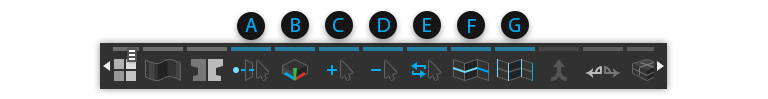
<style>
.page{position:relative;width:768px;height:99px;background:#ffffff}
.page>*{position:absolute;margin:0}
.t1{font:15.4px "MyriadPro-Regular";color:#00aaef;text-transform:uppercase}
</style>
<div class="page">
<p class="t1" style="left:245px;top:18px;width:12px;height:14px">a</p>
<p class="t1" style="left:291px;top:18px;width:9px;height:14px">b</p>
<p class="t1" style="left:333px;top:18px;width:11px;height:14px">c</p>
<p class="t1" style="left:378px;top:18px;width:12px;height:14px">d</p>
<p class="t1" style="left:423px;top:18px;width:8px;height:14px">e</p>
<p class="t1" style="left:468px;top:19px;width:8px;height:14px">F</p>
<p class="t1" style="left:509px;top:18px;width:11px;height:14px">G</p>
</div>
